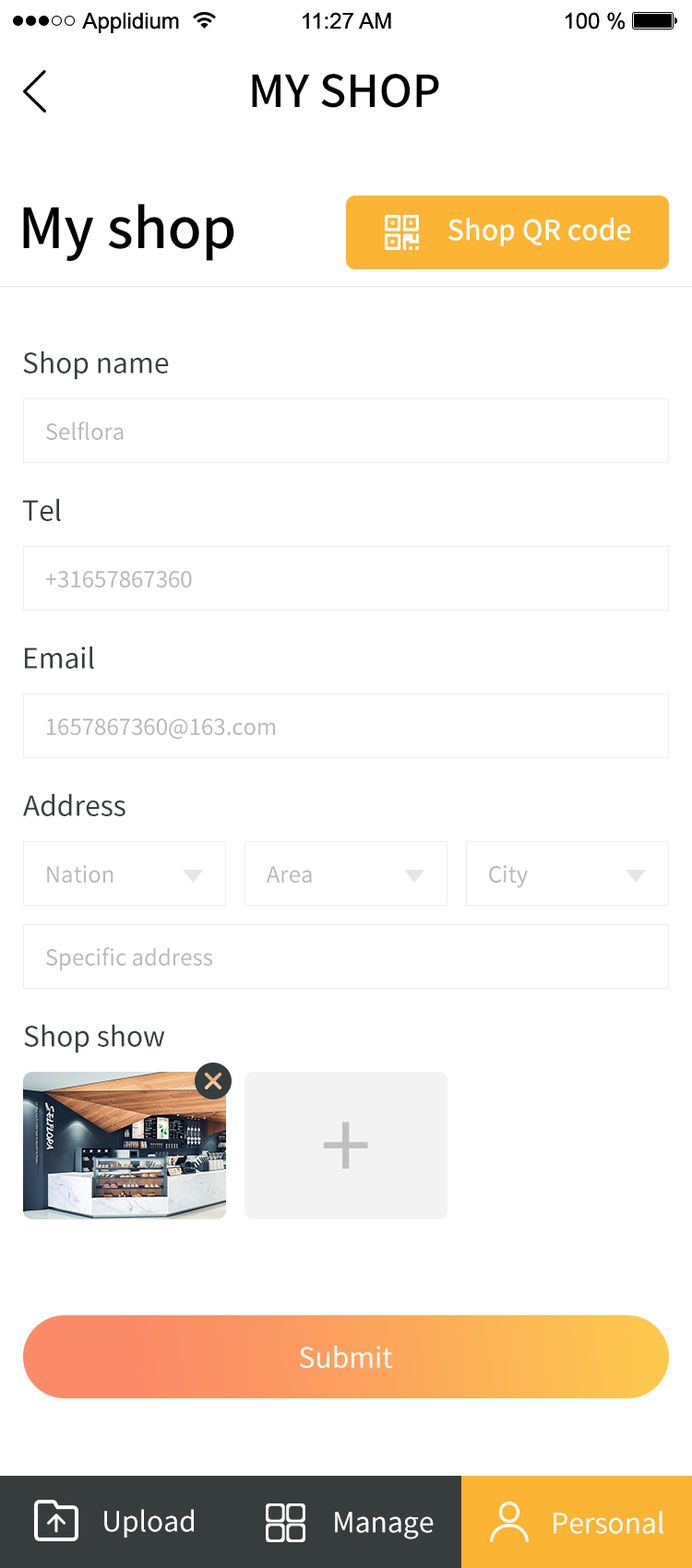
<style>
.page{position:relative;width:692px;height:1568px;background:#ffffff}
.page>*{position:absolute;margin:0}
.t1{font:44.3px "SourceHanSansCN-Medium";color:#010101;text-transform:uppercase}
.t2{font:55.3px "SourceHanSansCN-Medium";color:#010101}
.t3{font:27.7px "SourceHanSansCN-Medium";color:#ffffff}
.t4{font:27.7px "SourceHanSansCN-Regular";color:#373c3d}
.t5{font:22.1px "SourceHanSansCN-Regular";color:#b8b8b8}
.t6{font:92.2px "SourceHanSansCN-Regular";color:#c0c0c0}
.t7{font:27.7px "SourceHanSansCN-Regular";color:#ffffff}
</style>
<div class="page">
<p class="t1" style="left:252px;top:74px;width:187px;height:34px">My shop</p>
<p class="t2" style="left:23px;top:204px;width:211px;height:57px">My shop</p>
<p class="t3" style="left:448px;top:218px;width:183px;height:28px">Shop QR code</p>
<p class="t4" style="left:23px;top:350px;width:146px;height:30px">Shop name</p>
<p class="t5" style="left:46px;top:422px;width:78px;height:18px">Selflora</p>
<p class="t4" style="left:22px;top:498px;width:39px;height:23px">Tel</p>
<p class="t5" style="left:45px;top:571px;width:147px;height:17px">+31657867360</p>
<p class="t4" style="left:25px;top:646px;width:69px;height:23px">Email</p>
<p class="t5" style="left:46px;top:719px;width:229px;height:20px">1657867360@163.com</p>
<p class="t4" style="left:23px;top:793px;width:102px;height:23px">Address</p>
<p class="t5" style="left:47px;top:865px;width:66px;height:18px">Nation</p>
<p class="t5" style="left:266px;top:866px;width:46px;height:17px">Area</p>
<p class="t5" style="left:489px;top:865px;width:39px;height:23px">City</p>
<p class="t5" style="left:46px;top:947px;width:166px;height:24px">Specific address</p>
<p class="t4" style="left:24px;top:1024px;width:141px;height:29px">Shop show</p>
<p class="t6" style="left:323px;top:1122px;width:45px;height:47px">+</p>
<p class="t7" style="left:300px;top:1346px;width:93px;height:23px">Submit</p>
<p class="t7" style="left:104px;top:1509px;width:90px;height:29px">Upload</p>
<p class="t7" style="left:335px;top:1512px;width:99px;height:27px">Manage</p>
<p class="t7" style="left:553px;top:1511px;width:111px;height:23px">Personal</p>
</div>
